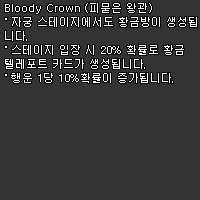
<style>
.page{position:relative;width:200px;height:200px;background:#333333}
.page>*{position:absolute;margin:0}
.t1{font:11px/14px "Dotum";color:#ffffff}
</style>
<div class="page">
<p class="t1" style="left:5px;top:3px;width:192px;height:80px">Bloody Crown (피묻은 왕관)<br>˚ 자궁 스테이지에서도 황금방이 생성됩<br>니다.<br>˚ 스테이지 입장 시 20% 확률로 황금<br>텔레포트 카드가 생성됩니다.<br>˚ 행운 1당 10%확률이 증가됩니다.</p>
</div>
